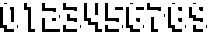
<style>
.page{position:relative;width:210px;height:32px;background:#ffffff}
.page>*{position:absolute;margin:0}
.t1{font:43px "04b25";color:#ffffff}
</style>
<div class="page">
<p class="t1" style="left:3px;top:0px;width:207px;height:29px">0123456789</p>
</div>
